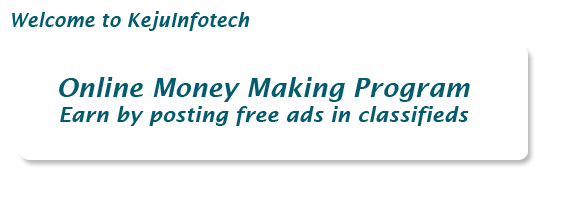
<style>
.page{position:relative;width:570px;height:200px;background:#ffffff}
.page>*{position:absolute;margin:0}
.t1{font:19px "LucidaSans-DemiItalic";color:#025c6c}
.t2{font:21px "LucidaSans-DemiItalic";color:#025c6c}
.t3{font:26px "LucidaSans-DemiItalic";color:#025c6c}
</style>
<div class="page">
<p class="t1" style="left:12px;top:11px;width:238px;height:20px">Welcome to KejuInfotech</p>
<p class="t2" style="left:59px;top:77px;width:411px;height:49px;text-align:center"><span class="t3"><br>Online Money Making Program<br></span>Earn by posting free ads in classifieds</p>
</div>
